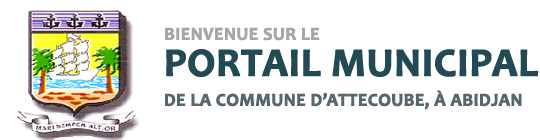
<style>
.page{position:relative;width:540px;height:140px;background:#ffffff}
.page>*{position:absolute;margin:0}
.t1{font:18px/30px "Candara-Bold";color:#56686c;font-weight:bold}
.t2{font:18px/36px "Candara-Bold";color:#202370;font-weight:bold}
.t3{font:18px/36px "Candara-Bold";color:#a3a7aa;font-weight:bold}
.t4{font:40px/36px "Candara-Bold";color:#214a54;font-weight:bold}
</style>
<div class="page">
<p class="t1" style="left:165px;top:27px;width:374px;height:83px"><span class="t2"><br></span><span class="t3">BIENVENUE SUR LE<br></span><span class="t4">PORTAIL MUNICIPAL<br></span>DE LA COMMUNE D’ATTECOUBE, À ABIDJAN</p>
</div>
